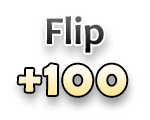
<style>
.page{position:relative;width:150px;height:120px;background:#ffffff}
.page>*{position:absolute;margin:0}
.t1{font:40px "Candara-Bold"}
.t2{font:50px "BerlinSansFBDemi-Bold";letter-spacing:0.05em}
</style>
<div class="page">
<p class="t1" style="left:46px;top:16px;width:58px;height:37px">Flip</p>
<p class="t2" style="left:18px;top:64px;width:109px;height:32px">+100</p>
</div>
